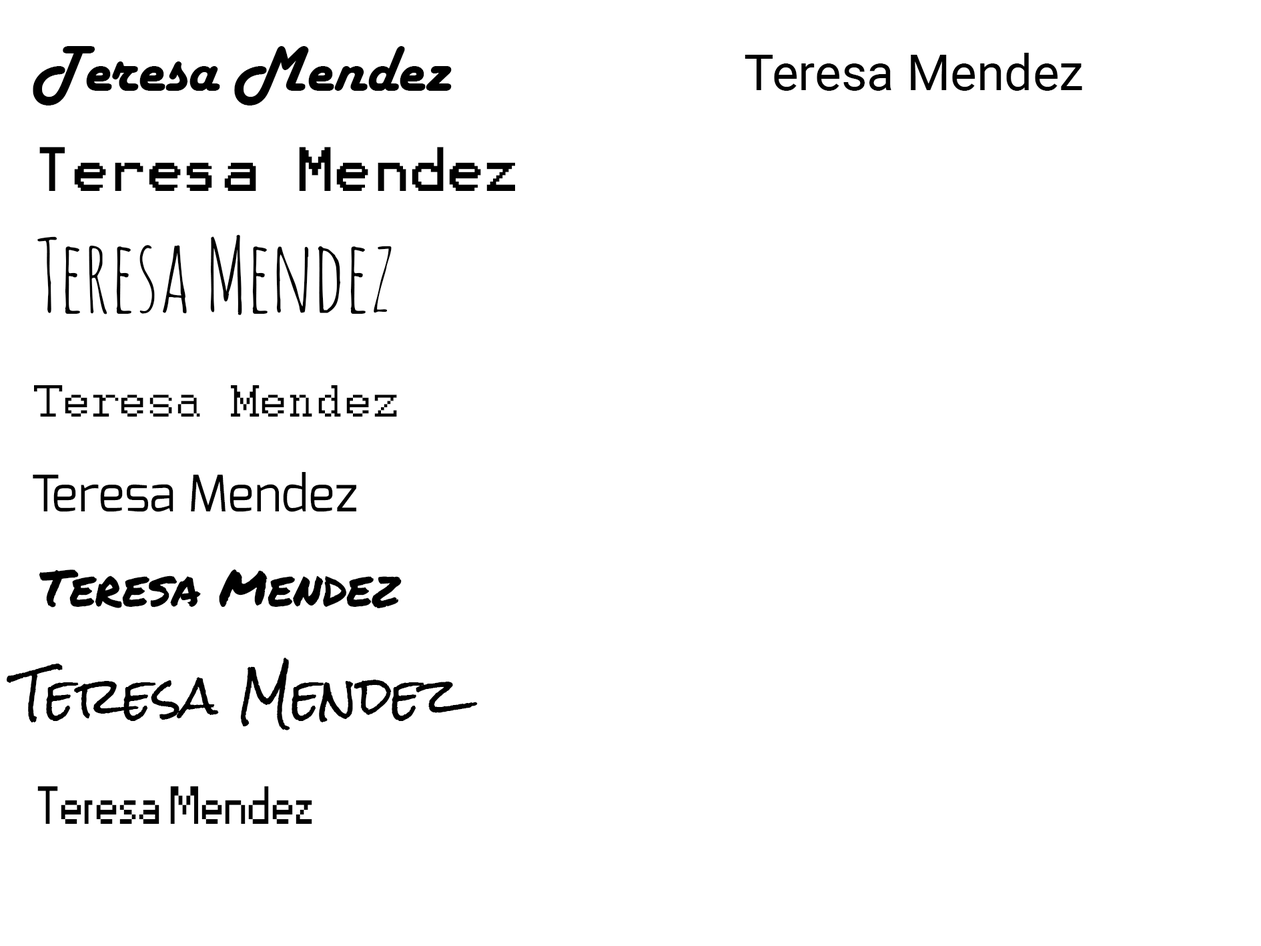
<style>
.page{position:relative;width:1261px;height:946px;background:#ffffff}
.page>*{position:absolute;margin:0}
.t1{font:66.7px "HarlowSolid";color:#000000}
.t2{font:50px "Roboto-Regular";color:#000000}
.t3{font:50px "Terminal";color:#000000}
.t4{font:100.1px "AmaticSC-Regular";color:#000000}
.t5{font:50px "Courier";color:#000000}
.t6{font:50px "Exo-Regular";color:#000000}
.t7{font:50px "PermanentMarker";color:#000000}
.t8{font:50px "RockSalt";color:#000000}
.t9{font:50px "Small Fonts";color:#000000}
</style>
<div class="page">
<p class="t1" style="left:33px;top:46px;width:419px;height:59px">Teresa Mendez</p>
<p class="t2" style="left:745px;top:53px;width:337px;height:38px">Teresa Mendez</p>
<p class="t3" style="left:39px;top:147px;width:476px;height:44px">Teresa Mendez</p>
<p class="t4" style="left:37px;top:234px;width:355px;height:82px">Teresa Mendez</p>
<p class="t5" style="left:34px;top:385px;width:363px;height:31px">Teresa Mendez</p>
<p class="t6" style="left:33px;top:472px;width:323px;height:40px">Teresa Mendez</p>
<p class="t7" style="left:39px;top:569px;width:363px;height:39px">Teresa Mendez</p>
<p class="t8" style="left:7px;top:657px;width:471px;height:73px">Teresa Mendez</p>
<p class="t9" style="left:37px;top:785px;width:275px;height:38px">Teresa Mendez</p>
</div>
